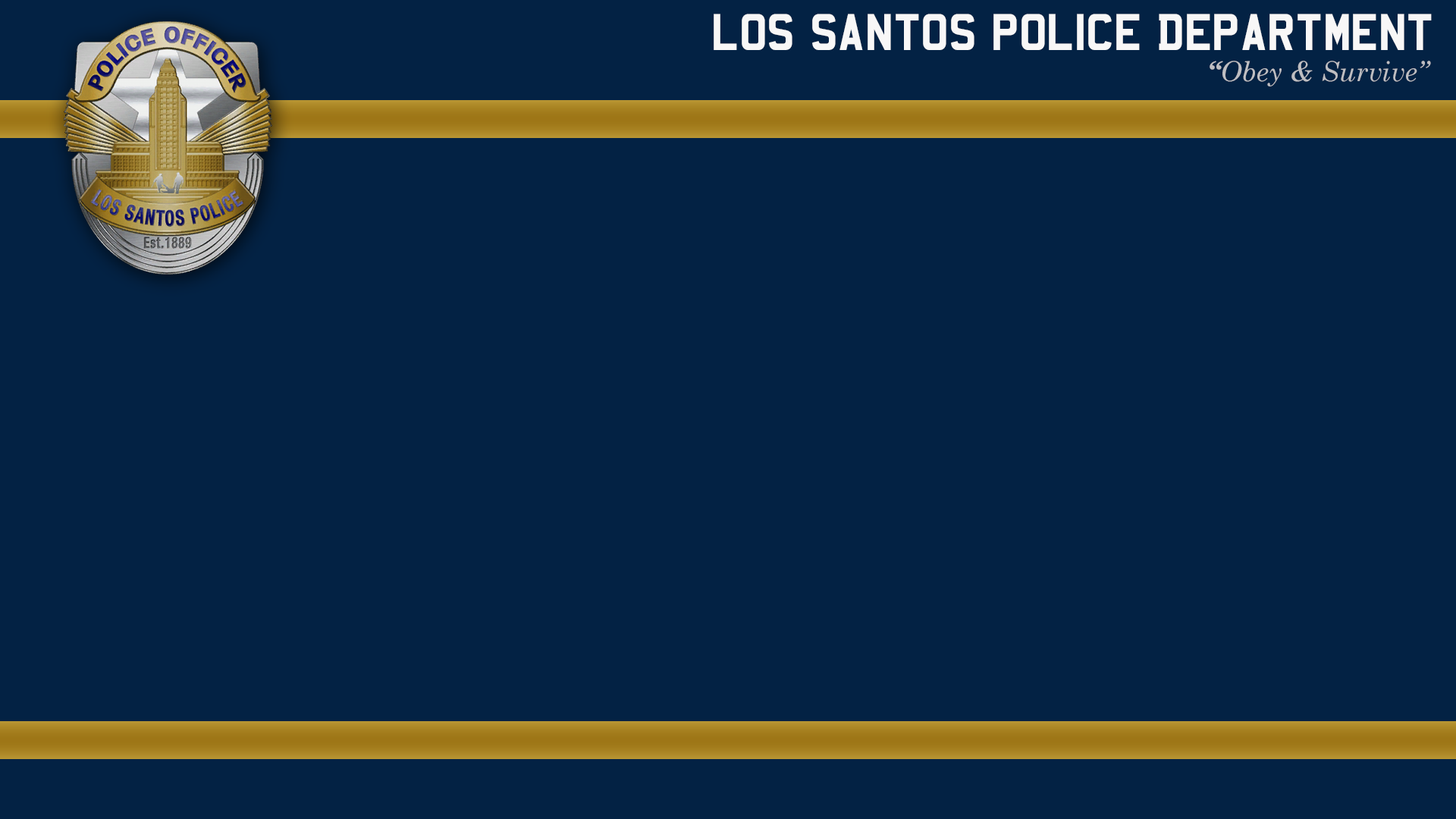
<style>
.page{position:relative;width:1456px;height:819px;background:#032244}
.page>*{position:absolute;margin:0}
.t1{font:45.5px "Mandatory";color:#f8f7f7}
.t2{font:27.3px "CenturySchoolbook-Italic";color:#bebec2}
.t3{font:27.3px "CenturySchoolbook-BoldItalic";color:#bebec2}
</style>
<div class="page">
<p class="t1" style="left:714px;top:14px;width:718px;height:36px">LOS SANTOS POLICE DEPARTMENT</p>
<p class="t2" style="left:1210px;top:61px;width:221px;height:25px"><span class="t3">“</span>Obey &amp; Survive”</p>
</div>
